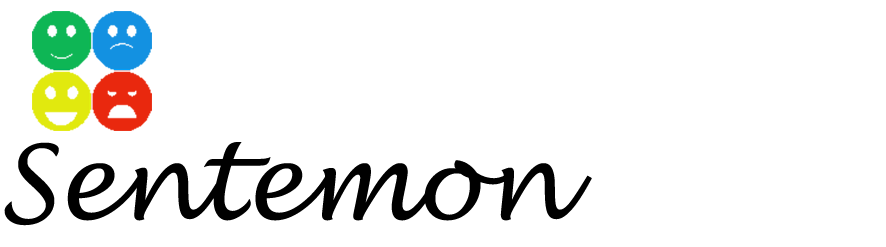
<style>
.page{position:relative;width:886px;height:247px;background:#ffffff}
.page>*{position:absolute;margin:0}
.t1{font:103px "LucidaHandwriting-Italic";color:#000000}
</style>
<div class="page">
<p class="t1" style="left:4px;top:142px;width:588px;height:84px">Sentemon</p>
</div>
